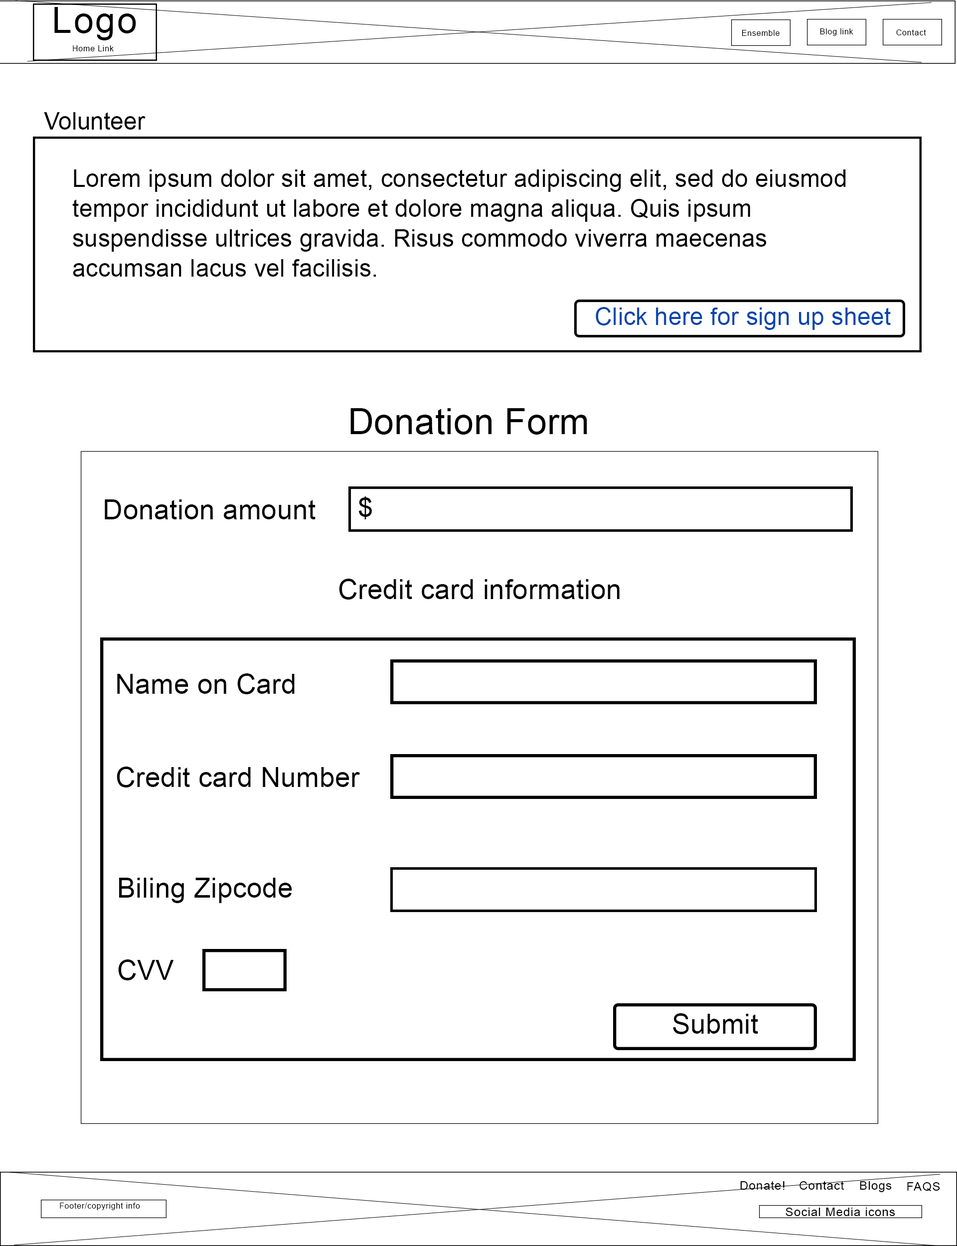
<style>
.page{position:relative;width:957px;height:1246px;background:#ffffff}
.page>*{position:absolute;margin:0}
.t1{font:35.9px "ArialMT";letter-spacing:0.05em;color:#000000}
.t2{font:8px "ArialMT";letter-spacing:0.05em;color:#000000}
.t3{font:23.9px "ArialMT";color:#000000}
.t4{font:23.9px/29.9px "ArialMT";letter-spacing:0.01em;color:#000000}
.t5{font:23.9px "ArialMT";letter-spacing:0.01em;color:#0645ad}
.t6{font:35.9px "ArialMT";letter-spacing:0.01em;color:#000000}
.t7{font:27.4px "ArialMT";letter-spacing:0.01em;color:#000000}
.t8{font:12px "ArialMT";letter-spacing:0.05em;color:#000000}
</style>
<div class="page">
<p class="t1" style="left:54px;top:7px;width:82px;height:33px">Logo</p>
<p class="t2" style="left:742px;top:30px;width:38px;height:6px">Ensemble</p>
<p class="t2" style="left:820px;top:28px;width:33px;height:8px">Blog link</p>
<p class="t2" style="left:896px;top:29px;width:30px;height:6px">Contact</p>
<p class="t2" style="left:73px;top:45px;width:41px;height:6px">Home Link</p>
<p class="t3" style="left:44px;top:112px;width:102px;height:18px">Volunteer</p>
<p class="t4" style="left:72px;top:169px;width:774px;height:108px">Lorem ipsum dolor sit amet, consectetur adipiscing elit, sed do eiusmod tempor incididunt ut labore et dolore magna aliqua. Quis ipsum suspendisse ultrices gravida. Risus commodo viverra maecenas accumsan lacus vel facilisis.</p>
<p class="t5" style="left:596px;top:307px;width:295px;height:23px">Click here for sign up sheet</p>
<p class="t6" style="left:350px;top:408px;width:237px;height:27px">Donation Form</p>
<p class="t7" style="left:359px;top:496px;width:13px;height:23px">$</p>
<p class="t7" style="left:105px;top:499px;width:211px;height:20px">Donation amount</p>
<p class="t7" style="left:339px;top:579px;width:281px;height:21px">Credit card information</p>
<p class="t7" style="left:117px;top:673px;width:178px;height:21px">Name on Card</p>
<p class="t7" style="left:117px;top:767px;width:243px;height:21px">Credit card Number</p>
<p class="t7" style="left:119px;top:878px;width:173px;height:25px">Biling Zipcode</p>
<p class="t7" style="left:118px;top:959px;width:56px;height:21px">CVV</p>
<p class="t7" style="left:673px;top:1013px;width:85px;height:21px">Submit</p>
<p class="t8" style="left:740px;top:1181px;width:45px;height:9px">Donate!</p>
<p class="t8" style="left:799px;top:1181px;width:45px;height:9px">Contact</p>
<p class="t8" style="left:860px;top:1181px;width:32px;height:11px">Blogs</p>
<p class="t8" style="left:907px;top:1182px;width:33px;height:9px">FAQS</p>
<p class="t2" style="left:60px;top:1203px;width:80px;height:7px">Footer/copyright info</p>
<p class="t8" style="left:786px;top:1208px;width:109px;height:8px">Social Media icons</p>
</div>
